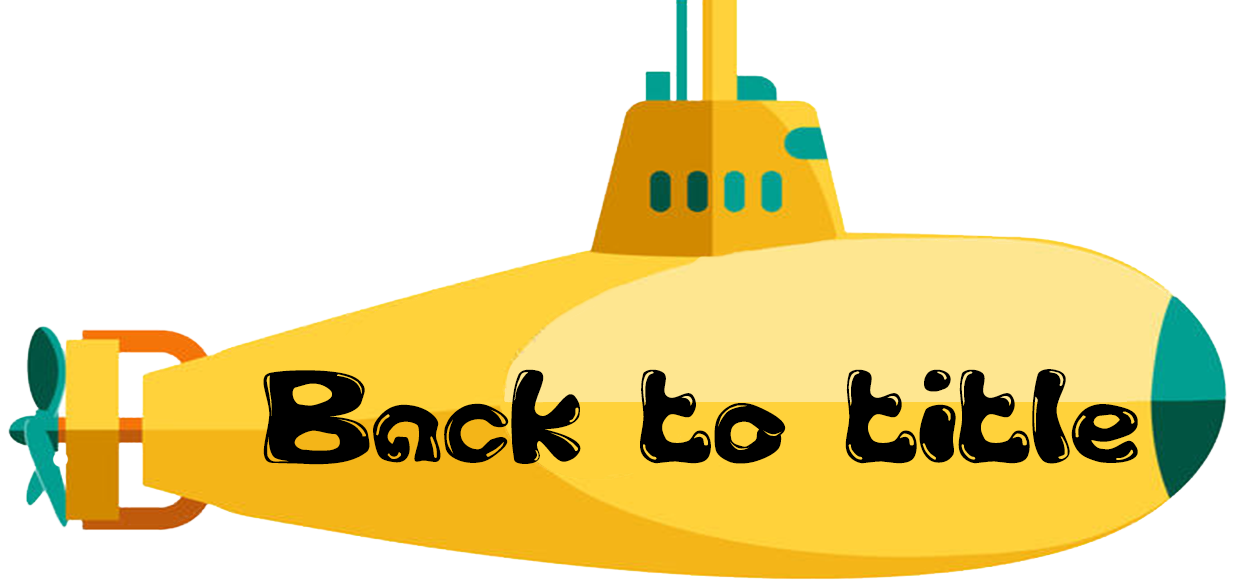
<style>
.page{position:relative;width:1235px;height:586px;background:#ffffff}
.page>*{position:absolute;margin:0}
.t1{font:116.7px "GFS-Custom-Bubble1";color:#000000}
</style>
<div class="page">
<p class="t1" style="left:263px;top:369px;width:875px;height:96px">Back to title</p>
</div>
